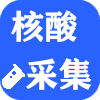
<style>
.page{position:relative;width:100px;height:100px;background:#2962ff}
.page>*{position:absolute;margin:0}
.t1{font:33.3px "FZCHSJW--GB1-0";color:#ffffff}
</style>
<div class="page">
<p class="t1" style="left:11px;top:10px;width:66px;height:32px">核酸</p>
<p class="t1" style="left:26px;top:58px;width:66px;height:32px">采集</p>
</div>
